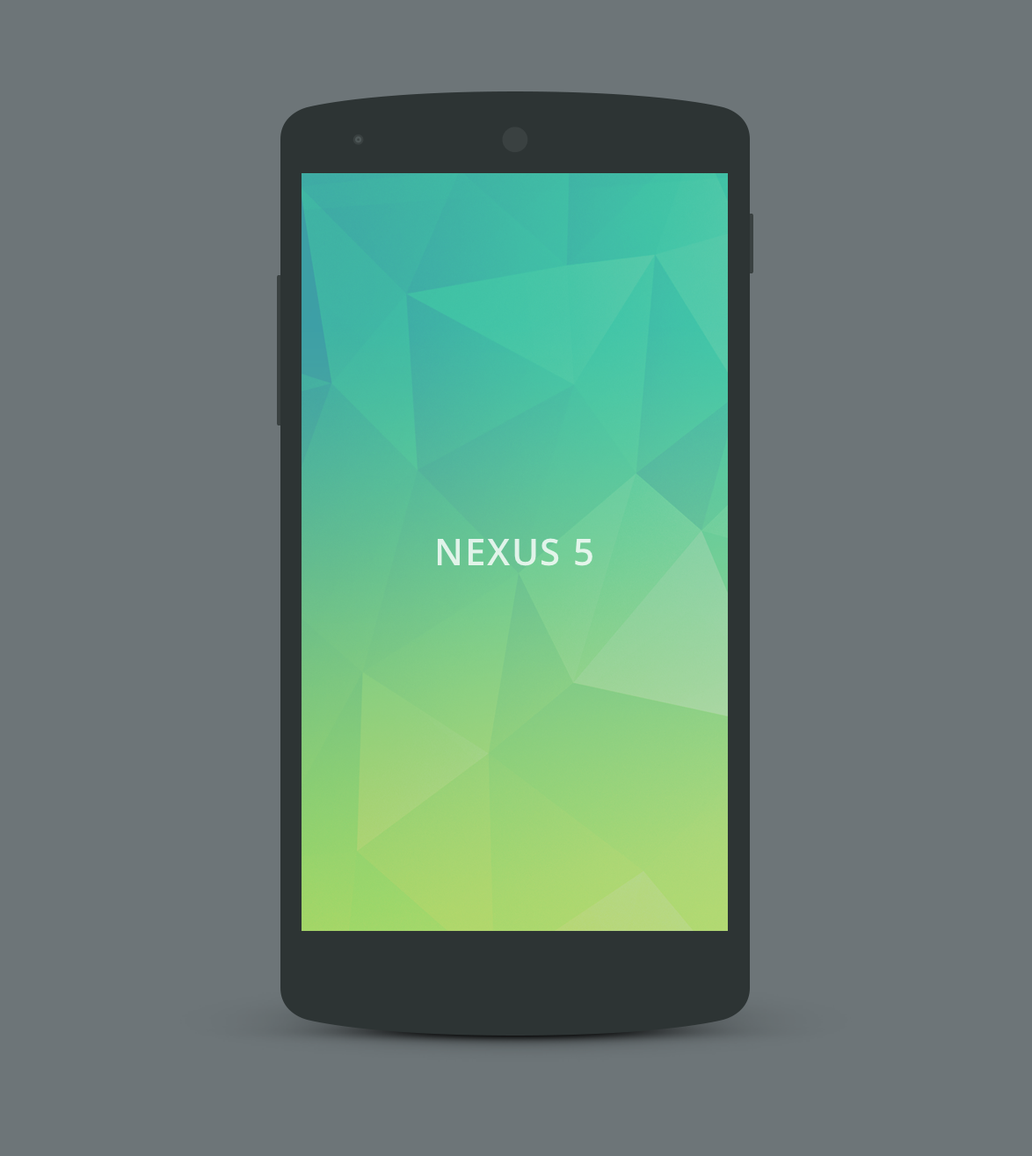
<style>
.page{position:relative;width:1032px;height:1156px;background:#6d7578}
.page>*{position:absolute;margin:0}
.t1{font:36.9px "OpenSans-Semibold";letter-spacing:0.04em;color:#e1f3ea}
</style>
<div class="page">
<p class="t1" style="left:437px;top:538px;width:155px;height:28px">NEXUS 5</p>
</div>
